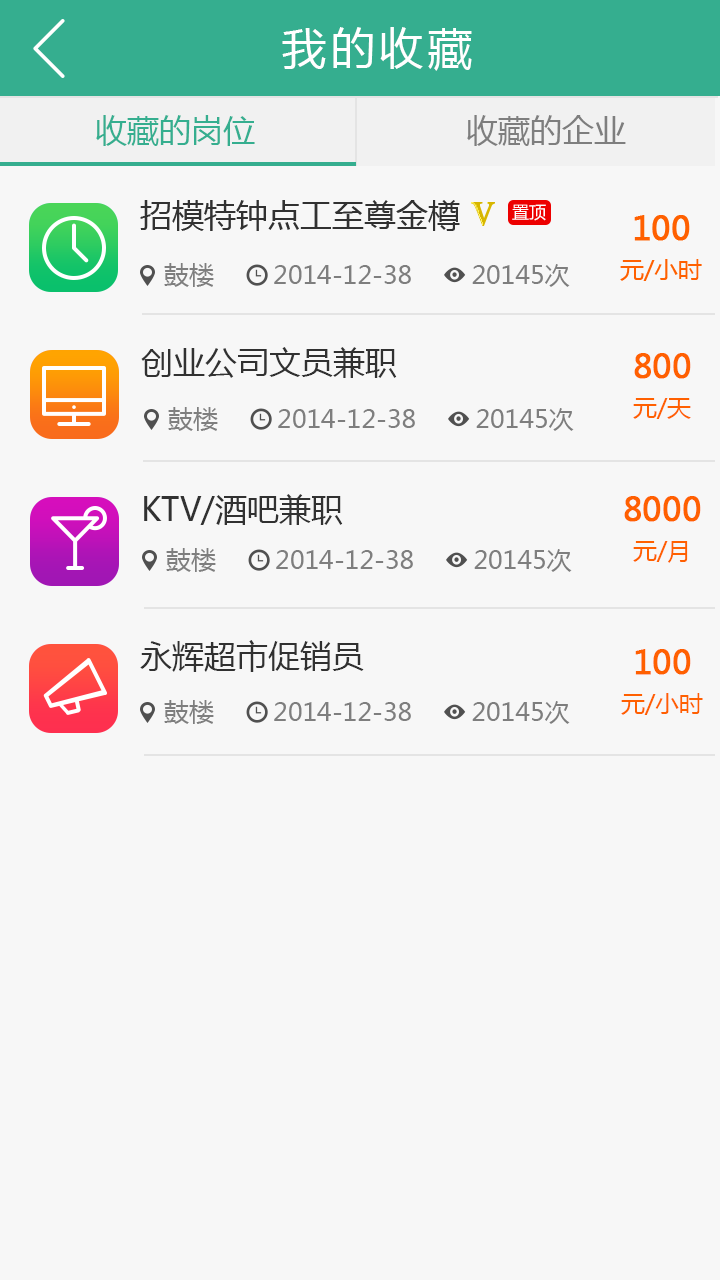
<style>
.page{position:relative;width:720px;height:1280px;background:#f7f7f7}
.page>*{position:absolute;margin:0}
.t1{font:44px "MicrosoftYaHei";letter-spacing:0.1em;color:#ffffff}
.t2{font:32px "MicrosoftYaHei";color:#35ae8f}
.t3{font:32px "MicrosoftYaHei";color:#7e7e7e}
.t4{font:32px "MicrosoftYaHei";color:#313131}
.t5{font:32px/45px "MicrosoftYaHei";color:#ff6000;font-weight:bold}
.t6{font:24px/45px "MicrosoftYaHei";color:#ff6000}
</style>
<div class="page">
<p class="t1" style="left:282px;top:27px;width:190px;height:44px">我的收藏</p>
<p class="t2" style="left:96px;top:115px;width:159px;height:31px">收藏的岗位</p>
<p class="t3" style="left:467px;top:115px;width:159px;height:31px">收藏的企业</p>
<p class="t4" style="left:141px;top:347px;width:256px;height:31px">创业公司文员兼职</p>
<p class="t5" style="left:633px;top:353px;width:58px;height:66px;text-align:center">800<br><span class="t6">元/天</span></p>
<p class="t4" style="left:144px;top:494px;width:199px;height:31px">KTV/酒吧兼职</p>
<p class="t5" style="left:624px;top:496px;width:77px;height:67px;text-align:center">8000<br><span class="t6">元/月</span></p>
<p class="t4" style="left:140px;top:640px;width:224px;height:32px">永辉超市促销员</p>
<p class="t6" style="left:621px;top:649px;width:82px;height:66px;text-align:center"><span class="t5">100<br></span>元/小时</p>
</div>
